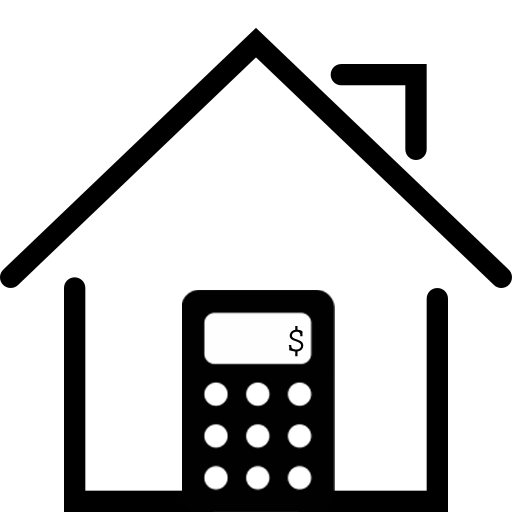
<style>
.page{position:relative;width:512px;height:512px;background:#ffffff}
.page>*{position:absolute;margin:0}
.t1{font:36.9px "PrestigeEliteStd-Bd";color:#000000}
</style>
<div class="page">
<p class="t1" style="left:288px;top:326px;width:16px;height:31px">$</p>
</div>
